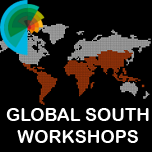
<style>
.page{position:relative;width:152px;height:152px;background:#000000}
.page>*{position:absolute;margin:0}
.t1{font:18px "ArialRoundedMTBold";color:#ffffff}
</style>
<div class="page">
<p class="t1" style="left:6px;top:108px;width:143px;height:35px;text-align:center">GLOBAL SOUTH<br>WORKSHOPS</p>
</div>
